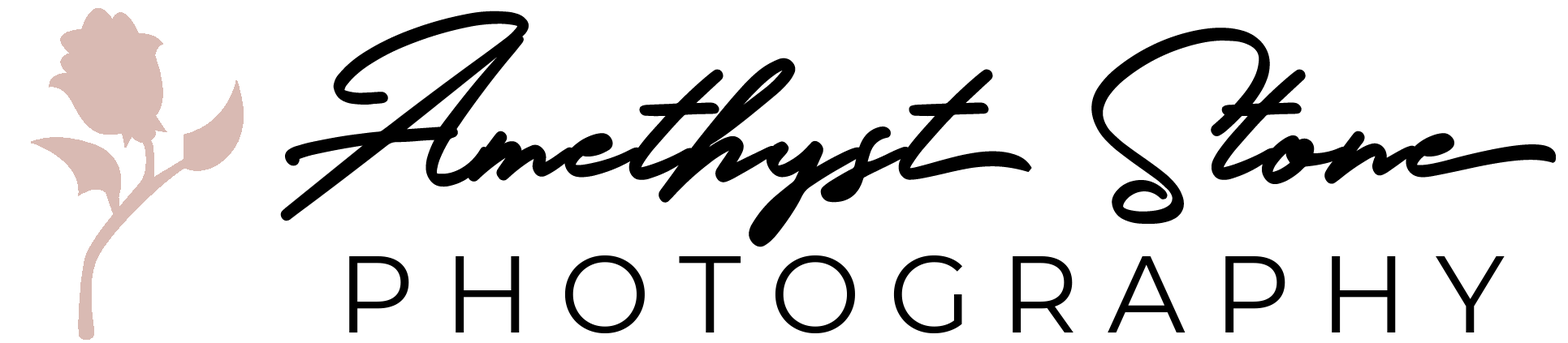
<style>
.page{position:relative;width:1568px;height:343px;background:#ffffff}
.page>*{position:absolute;margin:0}
.t1{font:203px "Holland";color:#000000;font-weight:bold}
.t2{font:108.3px "Montserrat-Regular";color:#000000}
</style>
<div class="page">
<p class="t1" style="left:280px;top:11px;width:1276px;height:237px">Amethyst Stone</p>
<p class="t2" style="left:349px;top:256px;width:1156px;height:78px">P H O T O G R A P H Y</p>
</div>
